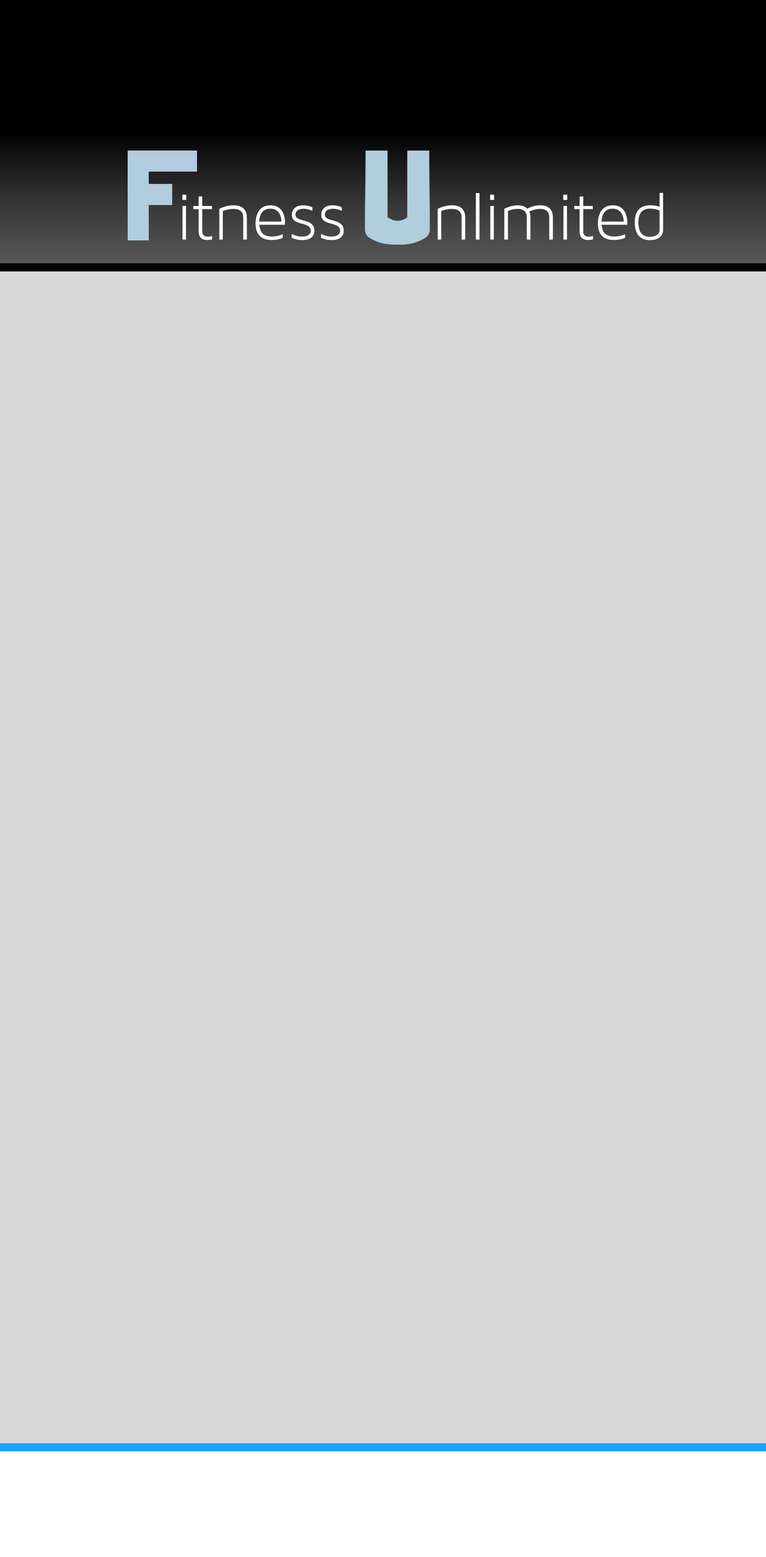
<style>
.page{position:relative;width:766px;height:1557px;background:#d7d7d7}
.page>*{position:absolute;margin:0}
.t1{font:68.9px "MavenProLight300-Regular";color:#fefbfb}
</style>
<div class="page">
<p class="t1" style="left:182px;top:193px;width:481px;height:47px">itness    nlimited</p>
</div>
